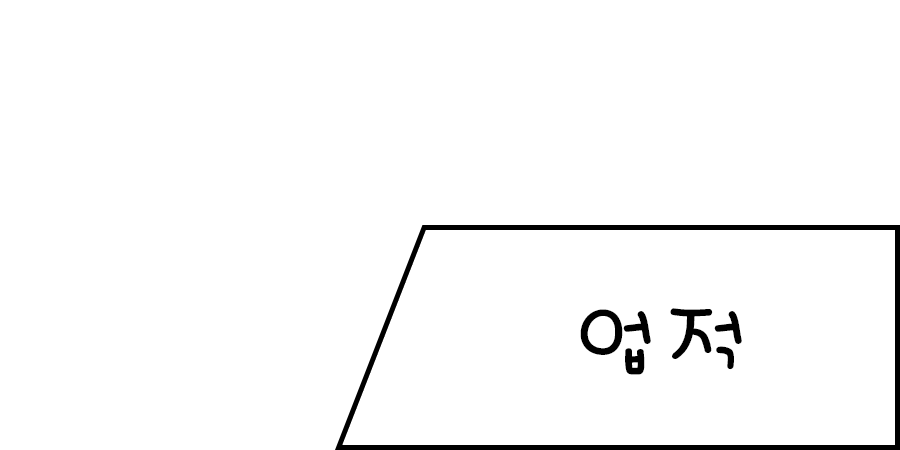
<style>
.page{position:relative;width:900px;height:450px;background:#ffffff}
.page>*{position:absolute;margin:0}
.t1{font:80px "TTByuleulssodaR";letter-spacing:0.18em;color:#000000}
</style>
<div class="page">
<p class="t1" style="left:580px;top:308px;width:162px;height:67px">업적</p>
</div>
